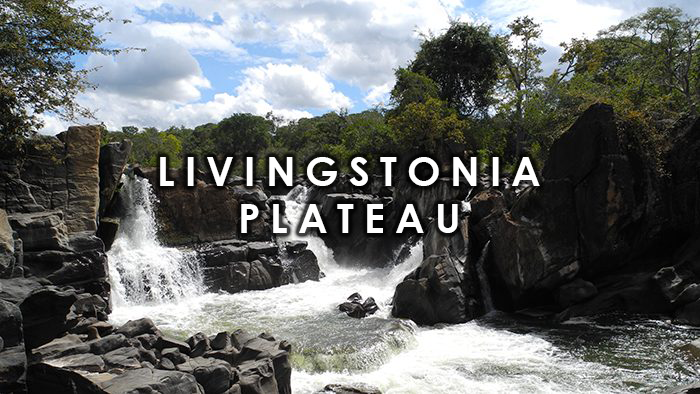
<style>
.page{position:relative;width:700px;height:394px}
.page>*{position:absolute;margin:0}
.t1{font:39.7px "CenturyGothic-Bold";letter-spacing:0.26em;color:#fefefe;text-transform:uppercase}
</style>
<div class="page">
<p class="t1" style="left:160px;top:157px;width:380px;height:76px;text-align:center">Livingstonia<br>Plateau</p>
</div>
